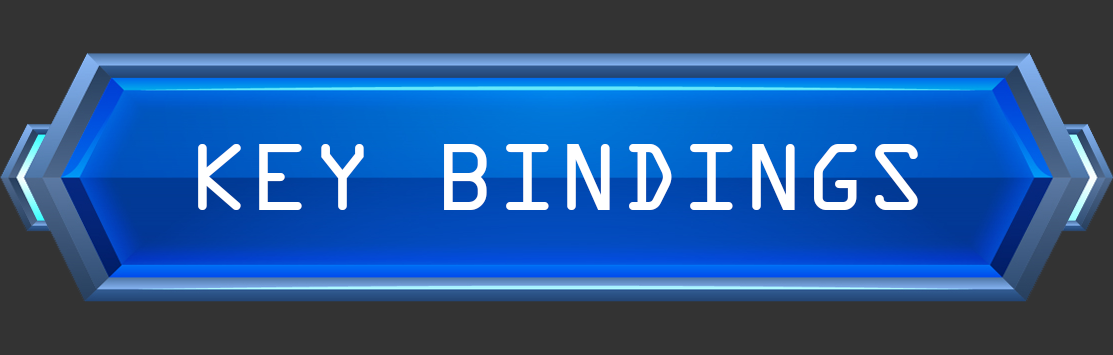
<style>
.page{position:relative;width:1113px;height:355px;background:#333333}
.page>*{position:absolute;margin:0}
.t1{font:102px "OCRAExtended";color:#ffffff}
</style>
<div class="page">
<p class="t1" style="left:198px;top:144px;width:720px;height:66px">KEY BINDINGS</p>
</div>
